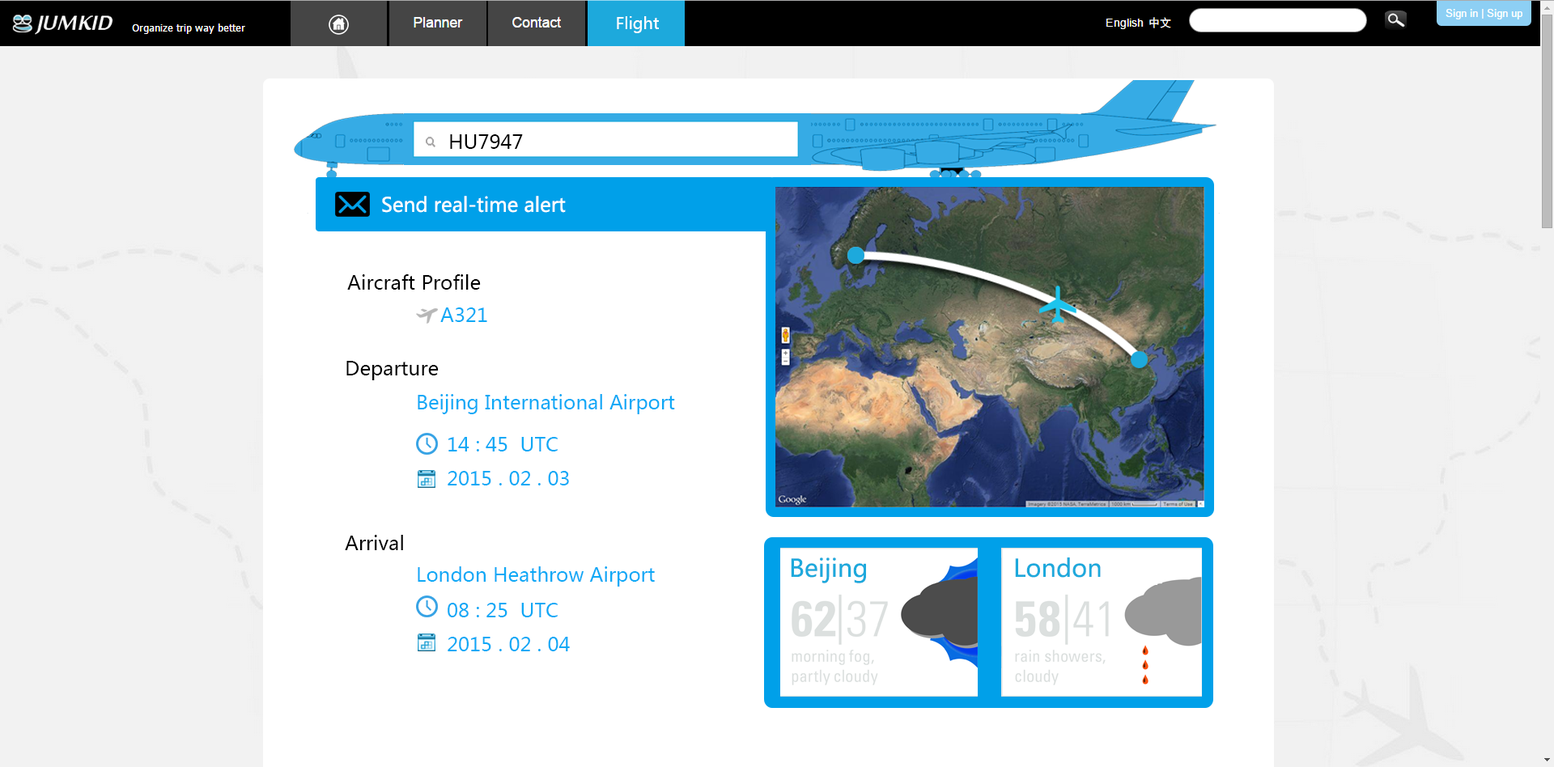
<style>
.page{position:relative;width:1554px;height:767px;background:#ffffff}
.page>*{position:absolute;margin:0}
.t1{font:16.2px "MicrosoftYaHei";color:#ffffff}
.t2{font:19.4px "MicrosoftYaHei";color:#010101}
.t3{font:19.6px "MicrosoftYaHei";color:#ffffff}
.t4{font:19.4px "MicrosoftYaHei";color:#0ea9f6}
.t5{font:24.3px "MicrosoftYaHei";color:#1da9dc}
</style>
<div class="page">
<p class="t1" style="left:617px;top:16px;width:42px;height:17px">Flight</p>
<p class="t2" style="left:450px;top:134px;width:73px;height:15px">HU7947</p>
<p class="t3" style="left:382px;top:196px;width:184px;height:17px">Send real-time alert</p>
<p class="t2" style="left:347px;top:274px;width:134px;height:16px">Aircraft Profile</p>
<p class="t4" style="left:440px;top:308px;width:47px;height:14px">A321</p>
<p class="t2" style="left:346px;top:361px;width:93px;height:19px">Departure</p>
<p class="t4" style="left:418px;top:394px;width:257px;height:20px">Beijing International Airport</p>
<p class="t4" style="left:448px;top:437px;width:121px;height:49px">14 : 45  UTC<br>2015 . 02 . 03</p>
<p class="t2" style="left:345px;top:535px;width:58px;height:15px">Arrival</p>
<p class="t5" style="left:791px;top:558px;width:75px;height:26px">Beijing</p>
<p class="t5" style="left:1015px;top:558px;width:86px;height:20px">London</p>
<p class="t4" style="left:418px;top:567px;width:237px;height:20px">London Heathrow Airport</p>
<p class="t4" style="left:448px;top:603px;width:122px;height:49px">08 : 25  UTC<br>2015 . 02 . 04</p>
</div>
